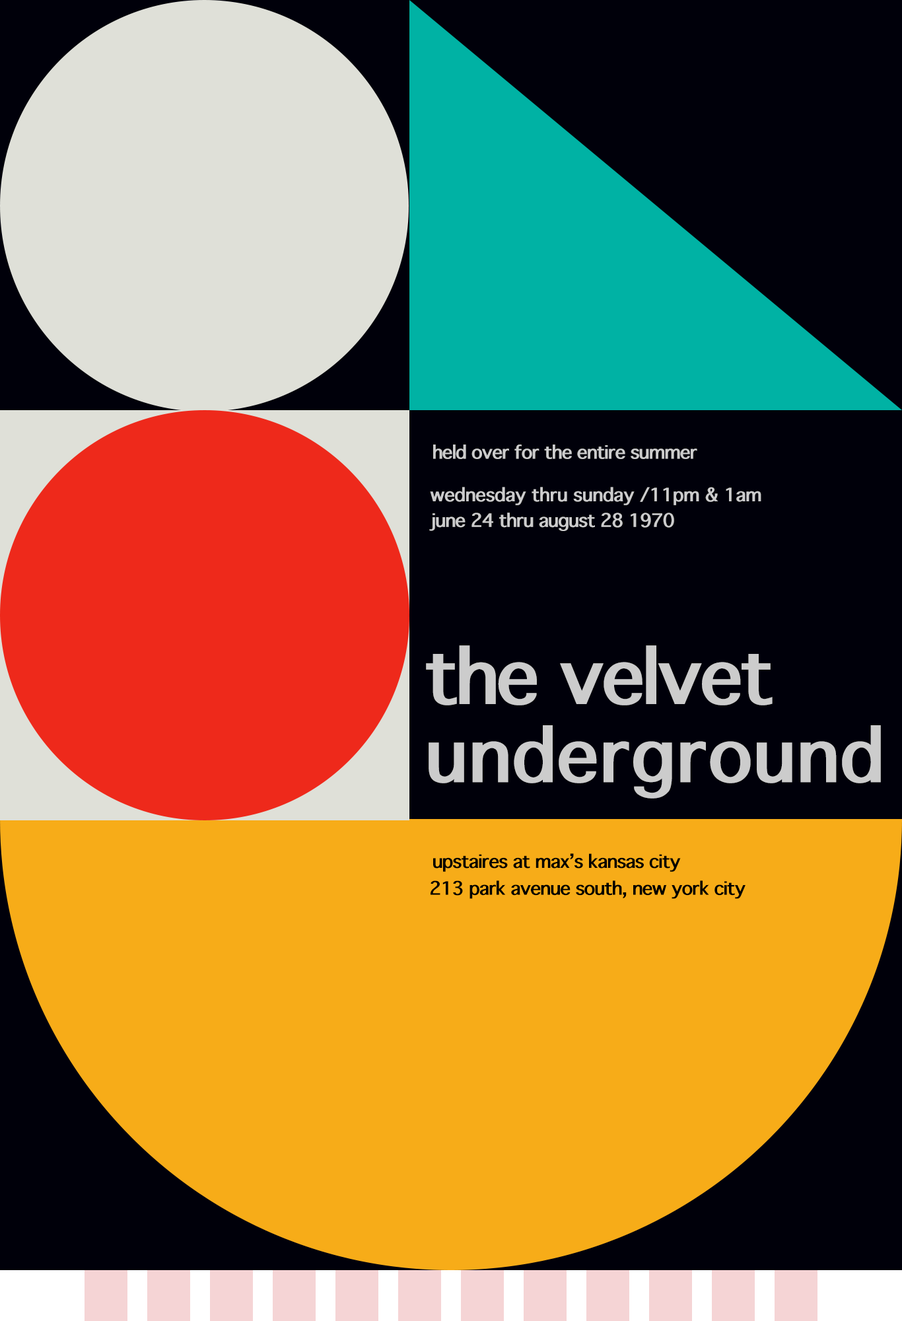
<style>
.page{position:relative;width:902px;height:1321px;background:#00000a}
.page>*{position:absolute;margin:0}
.t1{font:17.8px "Thonburi-Bold";letter-spacing:-0.025em;color:#cccccc}
.t2{font:17.8px "Thonburi-Bold";letter-spacing:-0.005em;color:#cccccc}
.t3{font:73.3px "Thonburi-Bold";letter-spacing:-0.025em;color:#cccccc}
.t4{font:71.4px "Thonburi-Bold";letter-spacing:0.025em;color:#cccccc}
.t5{font:17.8px "Thonburi-Bold";letter-spacing:-0.025em;color:#000000}
</style>
<div class="page">
<p class="t1" style="left:433px;top:445px;width:265px;height:14px">held over for the entire summer</p>
<p class="t2" style="left:430px;top:487px;width:332px;height:18px">wednesday thru sunday /11pm &amp; 1am</p>
<p class="t1" style="left:429px;top:513px;width:246px;height:18px">june 24 thru august 28 1970</p>
<p class="t3" style="left:426px;top:645px;width:347px;height:61px">the velvet</p>
<p class="t4" style="left:429px;top:725px;width:452px;height:74px">underground</p>
<p class="t5" style="left:433px;top:854px;width:248px;height:18px">upstaires at max’s kansas city</p>
<p class="t5" style="left:431px;top:881px;width:315px;height:18px">213 park avenue south, new york city</p>
</div>
